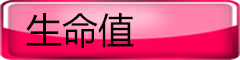
<style>
.page{position:relative;width:240px;height:60px}
.page>*{position:absolute;margin:0}
.t1{font:36px "MicrosoftYaHei";color:#040404}
</style>
<div class="page">
<p class="t1" style="left:26px;top:13px;width:108px;height:35px">生命值</p>
</div>
